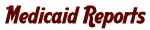
<style>
.page{position:relative;width:150px;height:30px;background:#ffffff}
.page>*{position:absolute;margin:0}
.t1{font:23.6px "AardvarkCafe";color:#610501;scale:0.96 1}
</style>
<div class="page">
<p class="t1" style="left:5px;top:5px;width:141px;height:24px">Medicaid Reports</p>
</div>
